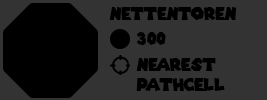
<style>
.page{position:relative;width:267px;height:100px;background:#333333}
.page>*{position:absolute;margin:0}
.t1{font:16.7px "SuperMarioGalaxy";color:#000000}
</style>
<div class="page">
<p class="t1" style="left:109px;top:7px;width:128px;height:13px">nettentoren</p>
<p class="t1" style="left:136px;top:32px;width:30px;height:13px">300</p>
<p class="t1" style="left:136px;top:58px;width:89px;height:33px">nearest<br>pathcell</p>
</div>
